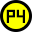
<style>
.page{position:relative;width:32px;height:32px;background:#fcff00}
.page>*{position:absolute;margin:0}
.t1{font:19px "SquareFont";color:#000000;scale:0.9 1}
</style>
<div class="page">
<p class="t1" style="left:6px;top:9px;width:19px;height:14px">P4</p>
</div>
